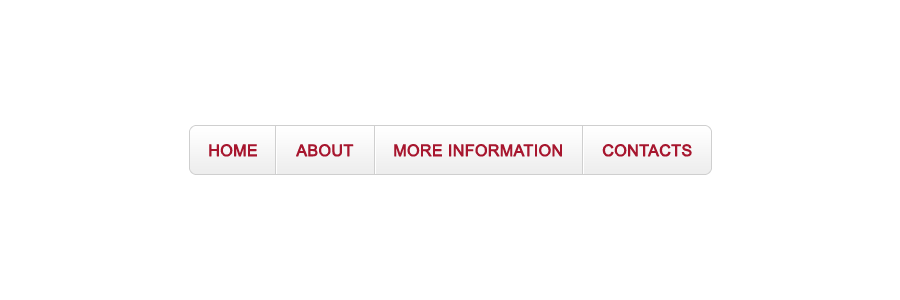
<style>
.page{position:relative;width:900px;height:300px;background:#ffffff}
.page>*{position:absolute;margin:0}
.t1{font:16px "ArialMT";color:#a7162e;font-weight:bold}
</style>
<div class="page">
<p class="t1" style="left:209px;top:144px;width:48px;height:13px">HOME</p>
<p class="t1" style="left:296px;top:144px;width:58px;height:13px">ABOUT</p>
<p class="t1" style="left:394px;top:144px;width:168px;height:13px">MORE INFORMATION</p>
<p class="t1" style="left:602px;top:144px;width:90px;height:13px">CONTACTS</p>
</div>
